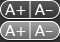
<style>
.page{position:relative;width:60px;height:42px}
.page>*{position:absolute;margin:0}
.t1{font:15px "LucidaGrande";letter-spacing:-0.025em;color:#ffffff}
</style>
<div class="page">
<p class="t1" style="left:5px;top:4px;width:21px;height:11px">A+</p>
<p class="t1" style="left:35px;top:4px;width:18px;height:11px">A-</p>
<p class="t1" style="left:5px;top:25px;width:21px;height:11px">A+</p>
<p class="t1" style="left:35px;top:25px;width:18px;height:11px">A-</p>
</div>
